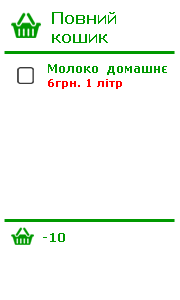
<style>
.page{position:relative;width:180px;height:300px;background:#ffffff}
.page>*{position:absolute;margin:0}
.t1{font:16px "Verdana-Bold";color:#009900}
.t2{font:12px "Verdana-Bold";color:#009900}
.t3{font:11px "Verdana-Bold";color:#ff0000}
</style>
<div class="page">
<p class="t1" style="left:52px;top:12px;width:64px;height:31px">Повний <br>кошик</p>
<p class="t2" style="left:48px;top:64px;width:119px;height:25px">Молоко  домашнє<br><span class="t3">6грн. 1 літр</span></p>
<p class="t2" style="left:43px;top:233px;width:22px;height:9px">-10</p>
</div>
